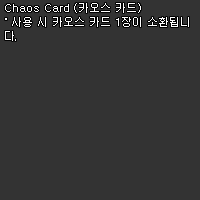
<style>
.page{position:relative;width:200px;height:200px;background:#333333}
.page>*{position:absolute;margin:0}
.t1{font:11px/14px "Dotum";color:#ffffff}
</style>
<div class="page">
<p class="t1" style="left:5px;top:3px;width:184px;height:38px">Chaos Card (카오스 카드)<br>˚ 사용 시 카오스 카드 1장이 소환됩니<br>다.</p>
</div>
